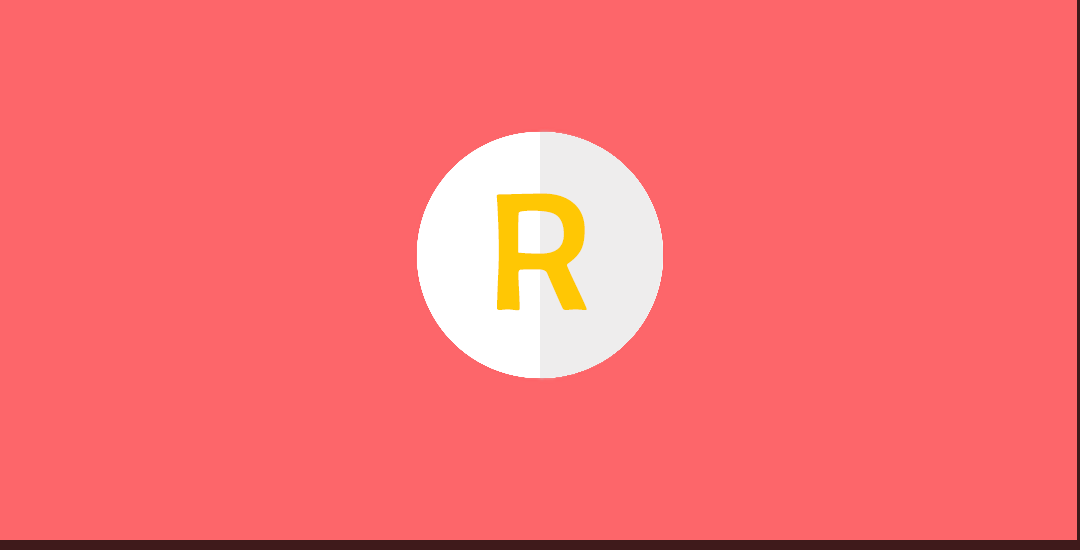
<style>
.page{position:relative;width:1080px;height:550px;background:#fd666a}
.page>*{position:absolute;margin:0}
.t1{font:169px "BerlinSansFB-Reg";color:#ffc704}
</style>
<div class="page">
<p class="t1" style="left:496px;top:193px;width:91px;height:118px">R</p>
</div>
